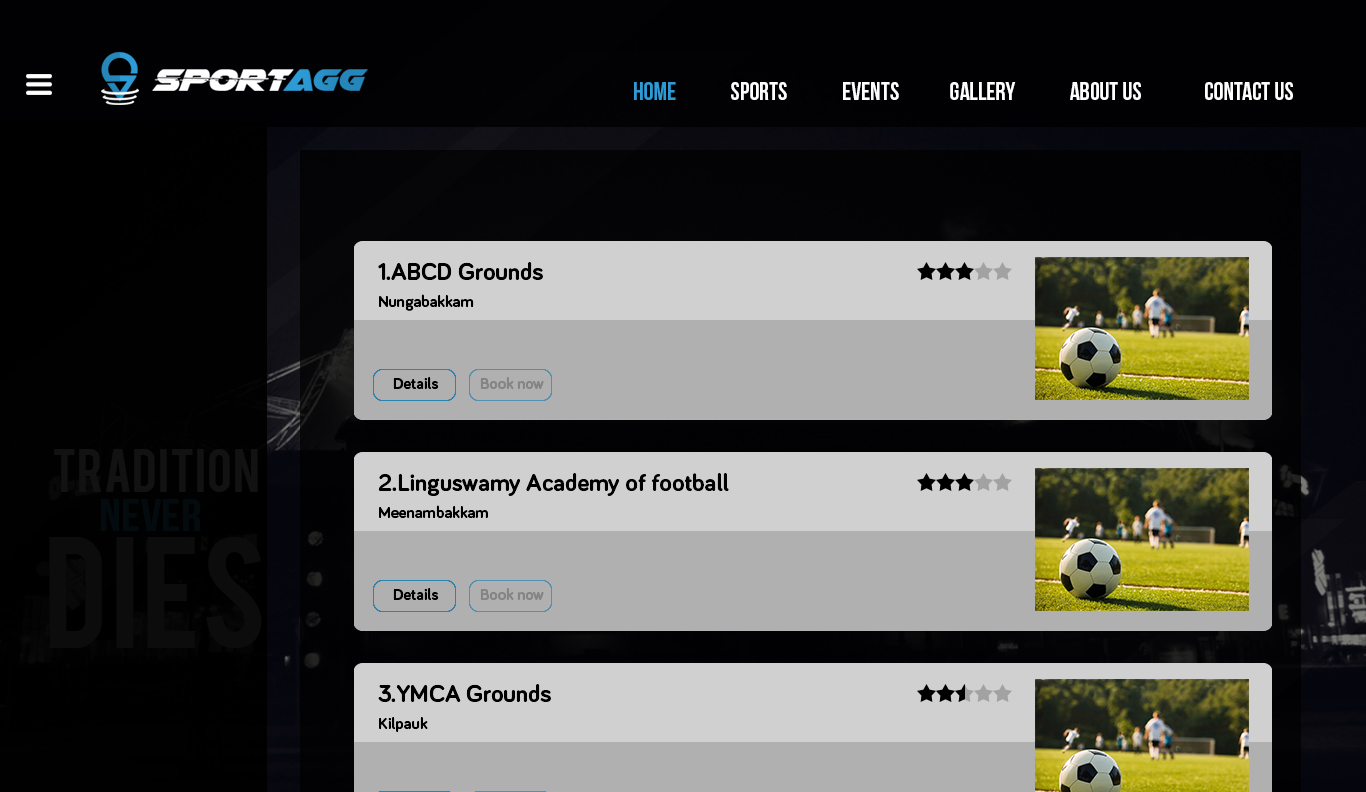
<style>
.page{position:relative;width:1366px;height:792px}
.page>*{position:absolute;margin:0}
.t1{font:25px "Bariol-Bold";color:#000000}
.t2{font:16.7px "Bariol-Bold";color:#000000}
.t3{font:16.7px "Bariol-Bold";color:#020204}
.t4{font:16.7px "Bariol-Bold";color:#858585}
</style>
<div class="page">
<p class="t1" style="left:378px;top:262px;width:165px;height:18px">1.ABCD Grounds</p>
<p class="t2" style="left:379px;top:294px;width:95px;height:17px">Nungabakkam</p>
<p class="t3" style="left:393px;top:377px;width:46px;height:12px">Details</p>
<p class="t4" style="left:480px;top:377px;width:64px;height:12px">Book now</p>
<p class="t1" style="left:378px;top:473px;width:351px;height:23px">2.Linguswamy Academy of football</p>
<p class="t2" style="left:379px;top:505px;width:109px;height:13px">Meenambakkam</p>
<p class="t3" style="left:393px;top:588px;width:46px;height:12px">Details</p>
<p class="t4" style="left:480px;top:588px;width:64px;height:12px">Book now</p>
<p class="t1" style="left:378px;top:684px;width:173px;height:18px">3.YMCA Grounds</p>
<p class="t2" style="left:379px;top:717px;width:49px;height:15px">Kilpauk</p>
</div>
